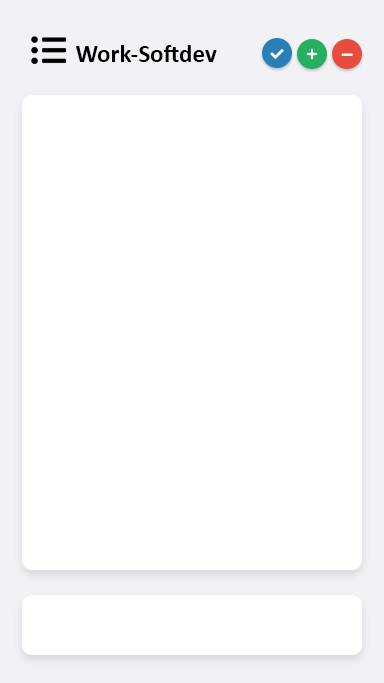
<style>
.page{position:relative;width:384px;height:683px;background:#ffffff}
.page>*{position:absolute;margin:0}
.t1{font:25px "Calibri-Bold";color:#000000}
</style>
<div class="page">
<p class="t1" style="left:76px;top:45px;width:141px;height:17px">Work-Softdev</p>
</div>
